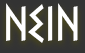
<style>
.page{position:relative;width:85px;height:53px}
.page>*{position:absolute;margin:0}
.t1{font:50px "Xtra";color:#ffffff}
</style>
<div class="page">
<p class="t1" style="left:6px;top:3px;width:72px;height:40px">nein</p>
</div>
